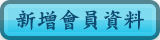
<style>
.page{position:relative;width:160px;height:40px}
.page>*{position:absolute;margin:0}
.t1{font:21.7px "DFKaiShuStd-W7";color:#0d4d75}
</style>
<div class="page">
<p class="t1" style="left:15px;top:9px;width:129px;height:22px">新增會員資料</p>
</div>
